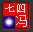
<style>
.page{position:relative;width:33px;height:32px;background:#f20000}
.page>*{position:absolute;margin:0}
.t1{font:10.4px "SimSun";color:#ffffff}
.t2{font:11.7px "SimSun";color:#ffffff}
</style>
<div class="page">
<p class="t1" style="left:5px;top:4px;width:20px;height:9px">七四</p>
<p class="t2" style="left:16px;top:15px;width:11px;height:12px">冯</p>
</div>
